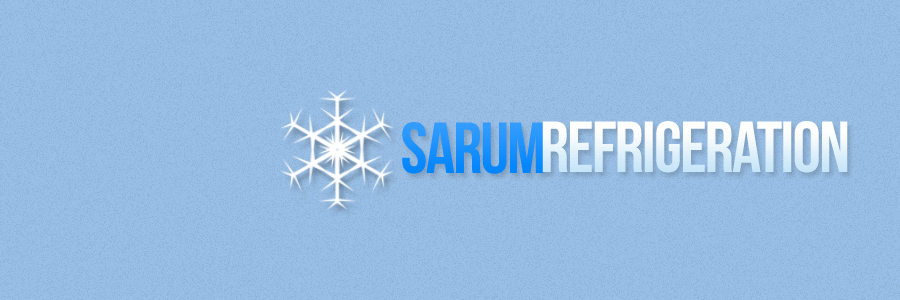
<style>
.page{position:relative;width:900px;height:300px;background:#99bfe6}
.page>*{position:absolute;margin:0}
.t1{font:72px "BebasNeue";letter-spacing:-0.025em;color:#1a90fe}
.t2{font:72px "BebasNeue";letter-spacing:-0.025em}
</style>
<div class="page">
<p class="t1" style="left:402px;top:122px;width:142px;height:52px">Sarum</p>
<p class="t2" style="left:542px;top:121px;width:306px;height:52px">refrigeration</p>
</div>
